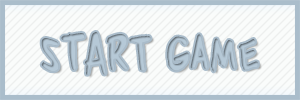
<style>
.page{position:relative;width:300px;height:100px;background:#fafcfb}
.page>*{position:absolute;margin:0}
.t1{font:75px "ZerocalcareBlockletter";color:#b2c5d3;scale:0.94 1}
</style>
<div class="page">
<p class="t1" style="left:41px;top:32px;width:217px;height:43px">START GAME</p>
</div>
